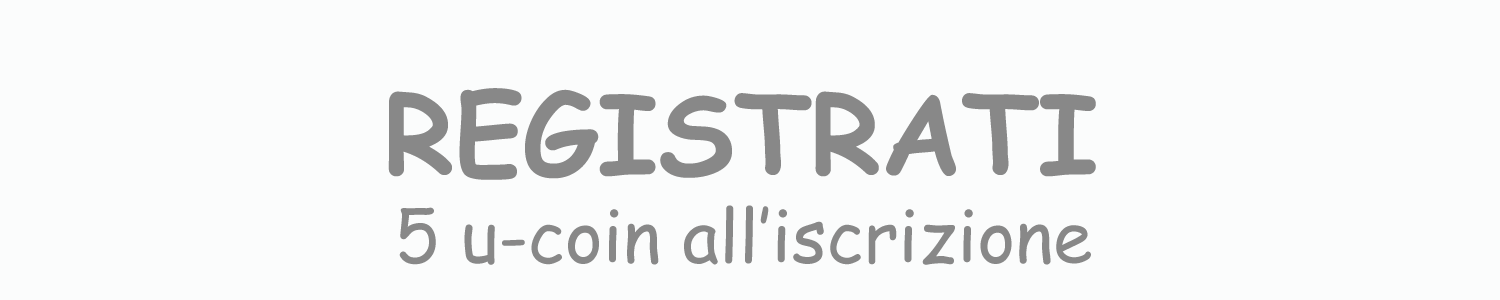
<style>
.page{position:relative;width:1500px;height:300px;background:#fbfcfc}
.page>*{position:absolute;margin:0}
.t1{font:110px "ComicSansMS-Bold";color:#888888}
.t2{font:72px "ComicSansMS";color:#888888}
</style>
<div class="page">
<p class="t1" style="left:388px;top:88px;width:708px;height:92px">REGISTRATI</p>
<p class="t2" style="left:399px;top:205px;width:692px;height:60px">5 u-coin all’iscrizione</p>
</div>
